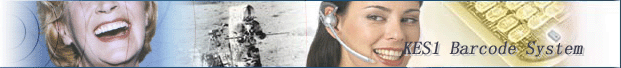
<style>
.page{position:relative;width:621px;height:68px}
.page>*{position:absolute;margin:0}
.t1{font:18px "SimSun";color:#40404e;font-weight:bold;font-style:italic}
</style>
<div class="page">
<p class="t1" style="left:402px;top:41px;width:181px;height:16px">KES1 Barcode System</p>
</div>
